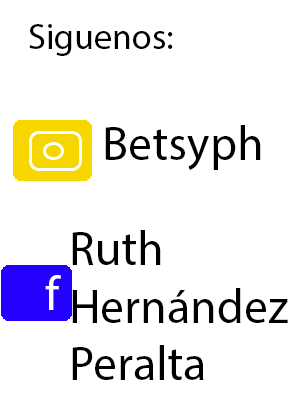
<style>
.page{position:relative;width:290px;height:400px;background:#ffffff}
.page>*{position:absolute;margin:0}
.t1{font:36px "MyriadPro-Regular";color:#000000}
.t2{font:48px "MyriadPro-Regular";color:#000000}
.t3{font:48px "MyriadPro-Regular";color:#ffffff}
</style>
<div class="page">
<p class="t1" style="left:29px;top:24px;width:144px;height:32px">Siguenos:</p>
<p class="t2" style="left:105px;top:125px;width:156px;height:45px">Betsyph</p>
<p class="t2" style="left:72px;top:230px;width:216px;height:150px">Ruth <br>Hernández <br>Peralta</p>
<p class="t3" style="left:45px;top:275px;width:16px;height:35px">f</p>
</div>
